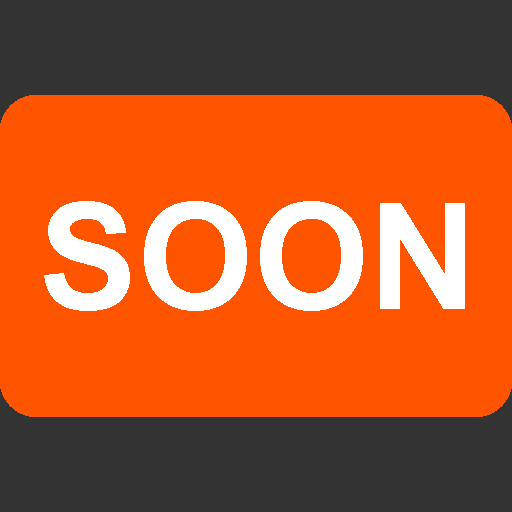
<style>
.page{position:relative;width:512px;height:512px;background:#ff5400}
.page>*{position:absolute;margin:0}
.t1{font:148.4px "Arial-BoldMT";color:#ffffff}
</style>
<div class="page">
<p class="t1" style="left:44px;top:201px;width:421px;height:110px">SOON</p>
</div>
